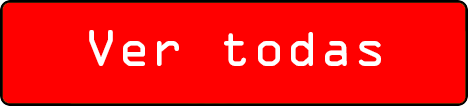
<style>
.page{position:relative;width:468px;height:106px;background:#ff0000}
.page>*{position:absolute;margin:0}
.t1{font:46.7px "OCRAStd";color:#ffffff}
</style>
<div class="page">
<p class="t1" style="left:89px;top:30px;width:292px;height:36px">Ver todas</p>
</div>
